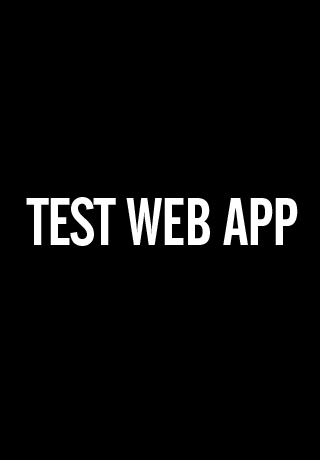
<style>
.page{position:relative;width:320px;height:460px;background:#000000}
.page>*{position:absolute;margin:0}
.t1{font:65.9px "AlternateGothicNo2BT-Regular";letter-spacing:-0.02em;color:#ffffff;text-transform:uppercase}
</style>
<div class="page">
<p class="t1" style="left:26px;top:197px;width:272px;height:49px">Test Web App</p>
</div>
